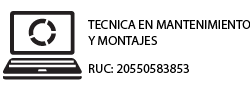
<style>
.page{position:relative;width:250px;height:90px;background:#ffffff}
.page>*{position:absolute;margin:0}
.t1{font:13px "MyriadPro-Regular";color:#000000}
</style>
<div class="page">
<p class="t1" style="left:88px;top:20px;width:163px;height:25px">TECNICA EN MANTENIMIENTO<br>Y MONTAJES</p>
<p class="t1" style="left:89px;top:64px;width:100px;height:9px">RUC: 20550583853</p>
</div>
